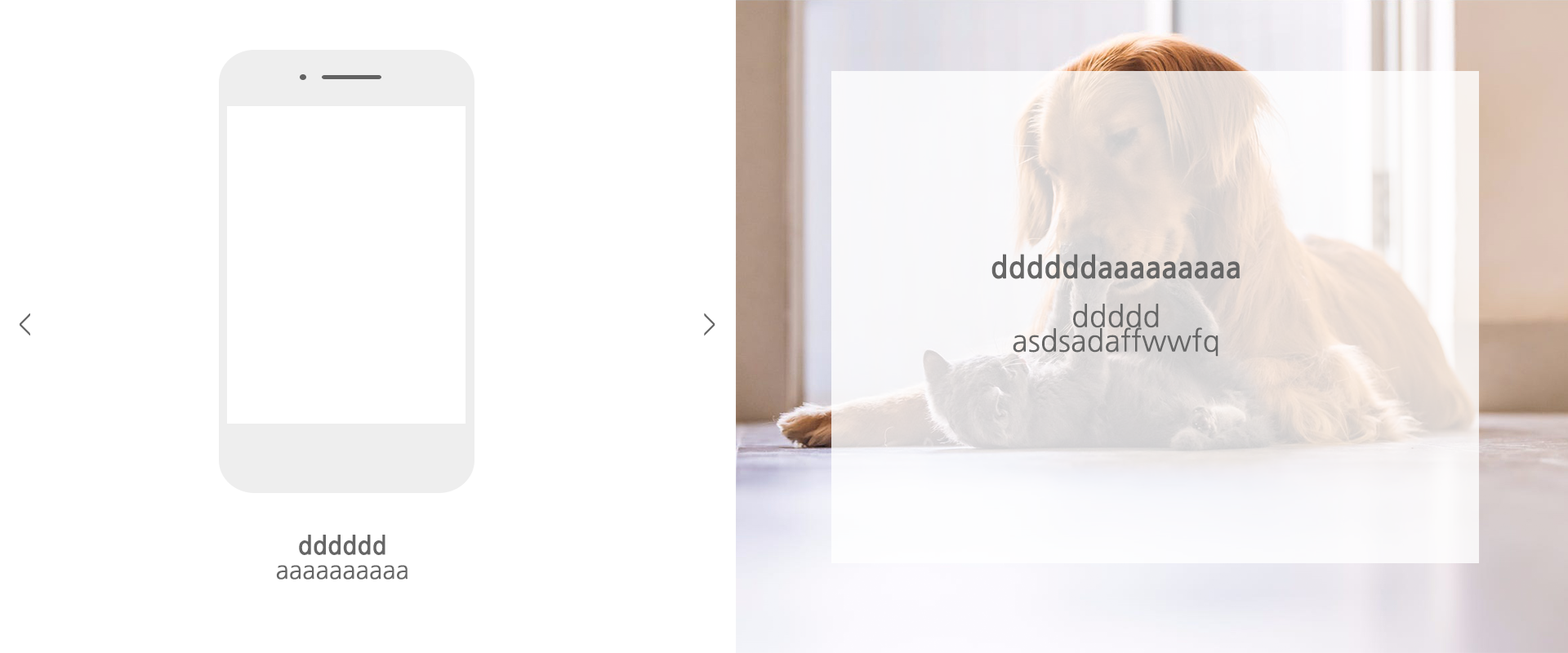
<style>
.page{position:relative;width:1568px;height:653px;background:#ffffff}
.page>*{position:absolute;margin:0}
.t1{font:29.4px/24.5px "NanumGothic";color:#666666}
.t2{font:29.4px/24.5px "NanumGothicBold";color:#666666}
.t3{font:24.5px "NanumGothic";color:#666666}
.t4{font:24.5px/24.5px "NanumGothic";color:#666666}
.t5{font:24.5px/24.5px "NanumGothicBold";color:#666666}
</style>
<div class="page">
<p class="t1" style="left:991px;top:254px;width:249px;height:103px;text-align:center"><span class="t2">ddddddaaaaaaaaa<br></span><br>ddddd<br>asdsadaffwwfq</p>
<p class="t3" style="left:20px;top:313px;width:10px;height:23px">&lt;</p>
<p class="t3" style="left:704px;top:313px;width:11px;height:23px">&gt;</p>
<p class="t4" style="left:276px;top:535px;width:132px;height:45px;text-align:center"><span class="t5">dddddd<br></span>aaaaaaaaaa</p>
</div>
